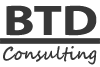
<style>
.page{position:relative;width:100px;height:67px;background:#ffffff}
.page>*{position:absolute;margin:0}
.t1{font:59.8px "MyriadArabic-Bold";color:#373737;scale:1.21 1}
.t2{font:18.6px "SegoeScript-Bold";color:#373737;scale:0.88 1}
</style>
<div class="page">
<p class="t1" style="left:6px;top:5px;width:91px;height:31px">BTD</p>
<p class="t2" style="left:3px;top:46px;width:94px;height:19px">Consulting</p>
</div>
